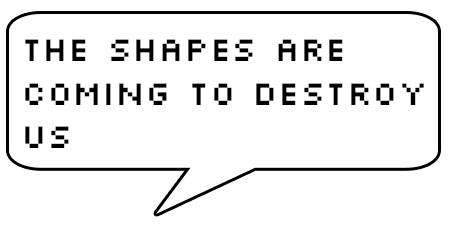
<style>
.page{position:relative;width:450px;height:225px;background:#ffffff}
.page>*{position:absolute;margin:0}
.t1{font:36px "Silkscreen";color:#000000}
</style>
<div class="page">
<p class="t1" style="left:25px;top:39px;width:399px;height:109px;text-align:right">THE SHAPES ARE COMING TO Destroy<br>US</p>
</div>
